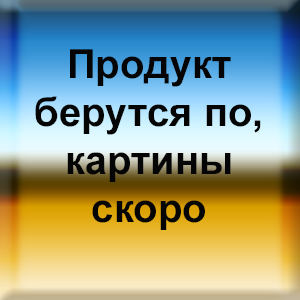
<style>
.page{position:relative;width:300px;height:300px}
.page>*{position:absolute;margin:0}
.t1{font:40px "Arial-BoldMT";color:#050505}
</style>
<div class="page">
<p class="t1" style="left:35px;top:49px;width:226px;height:181px;text-align:center">Продукт берутся по, картины<br>скоро</p>
</div>
